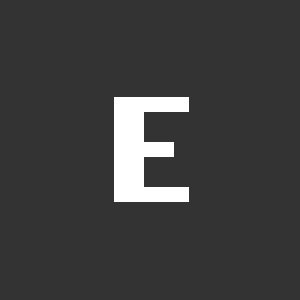
<style>
.page{position:relative;width:300px;height:300px;background:#333333}
.page>*{position:absolute;margin:0}
.t1{font:150px "Hardpixel";color:#ffffff}
</style>
<div class="page">
<p class="t1" style="left:114px;top:97px;width:75px;height:105px">E</p>
</div>
